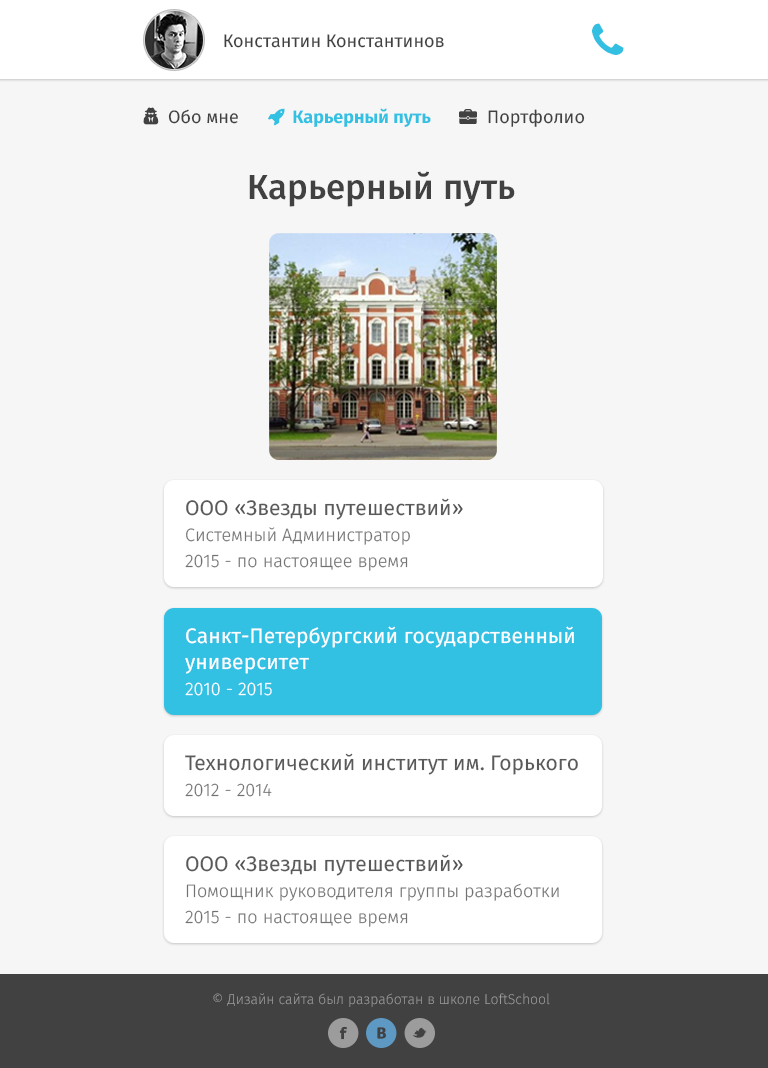
<style>
.page{position:relative;width:768px;height:1068px;background:#f6f6f6}
.page>*{position:absolute;margin:0}
.t1{font:18px "FiraSans-Regular";color:#414141}
.t2{font:34.8px "FiraSans-Medium";color:#414141}
.t3{font:18px/26px "FiraSans-Light";color:#727272}
.t4{font:21px/26px "FiraSans-Regular";color:#5a5a5a}
.t5{font:21px/26px "FiraSans-Regular";color:#515153}
.t6{font:21px/26px "FiraSans-Regular";color:#ffffff}
.t7{font:18px/26px "FiraSans-Light";color:#ffffff}
.t8{font:14.2px "FiraSans-Light";color:#9c9c9c}
</style>
<div class="page">
<p class="t1" style="left:224px;top:34px;width:220px;height:14px">Константин Константинов</p>
<p class="t1" style="left:488px;top:109px;width:97px;height:18px">Портфолио</p>
<p class="t2" style="left:249px;top:171px;width:266px;height:36px">Карьерный путь</p>
<p class="t3" style="left:185px;top:498px;width:278px;height:73px"><span class="t4">ООО </span><span class="t5">«</span><span class="t4">Звезды путешествий</span><span class="t5">»<br></span>Системный Администратор<br>2015 - по настоящее время</p>
<p class="t6" style="left:185px;top:626px;width:389px;height:70px">Санкт-Петербургский государственный университет<br><span class="t7">2010 - 2015</span></p>
<p class="t4" style="left:185px;top:753px;width:393px;height:44px">Технологический институт им. Горького<br><span class="t3">2012 - 2014</span></p>
<p class="t3" style="left:185px;top:854px;width:374px;height:73px"><span class="t4">ООО </span><span class="t5">«</span><span class="t4">Звезды путешествий</span><span class="t5">»<br></span>Помощник руководителя группы разработки<br>2015 - по настоящее время</p>
<p class="t8" style="left:213px;top:993px;width:337px;height:14px">© Дизайн сайта был разработан в школе LoftSchool</p>
</div>
